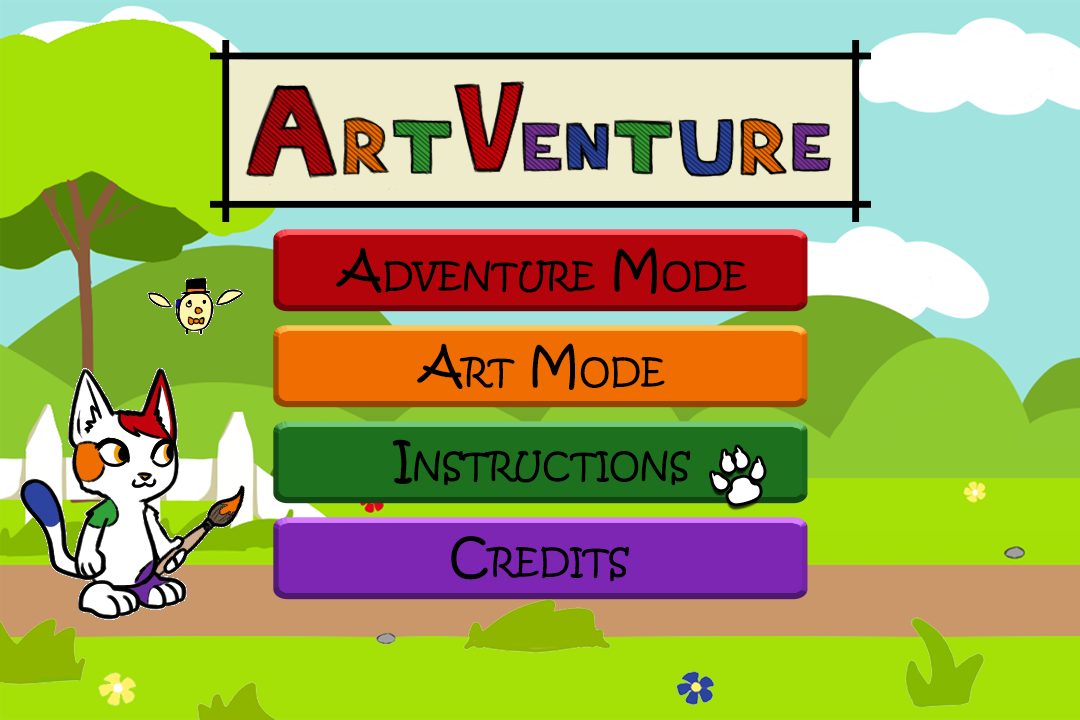
<style>
.page{position:relative;width:1080px;height:720px}
.page>*{position:absolute;margin:0}
.t1{font:48.6px "KristenITC-Regular";color:#000000;font-variant:small-caps}
</style>
<div class="page">
<p class="t1" style="left:336px;top:247px;width:411px;height:47px">Adventure Mode</p>
<p class="t1" style="left:417px;top:343px;width:248px;height:47px">Art Mode</p>
<p class="t1" style="left:392px;top:439px;width:299px;height:47px">Instructions</p>
<p class="t1" style="left:451px;top:536px;width:178px;height:46px">Credits</p>
</div>
